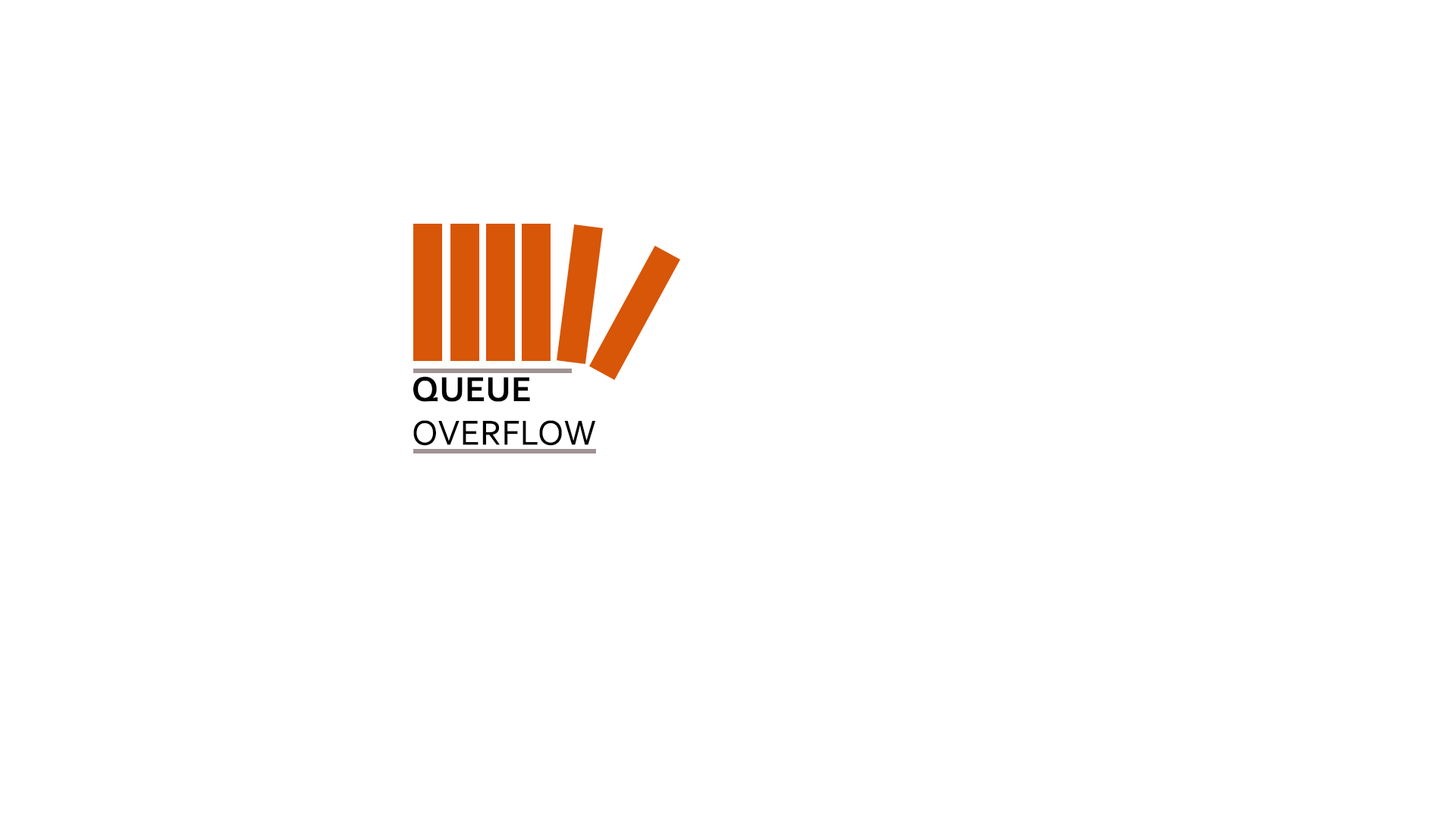
<style>
.page{position:relative;width:1456px;height:819px;background:#ffffff}
.page>*{position:absolute;margin:0}
.t1{font:36.4px "Corbel";color:#000000}
.t2{font:36.4px "Corbel-Bold";color:#000000}
</style>
<div class="page">
<p class="t1" style="left:413px;top:376px;width:182px;height:70px"><span class="t2">QUEUE</span> <br>OVERFLOW</p>
</div>
